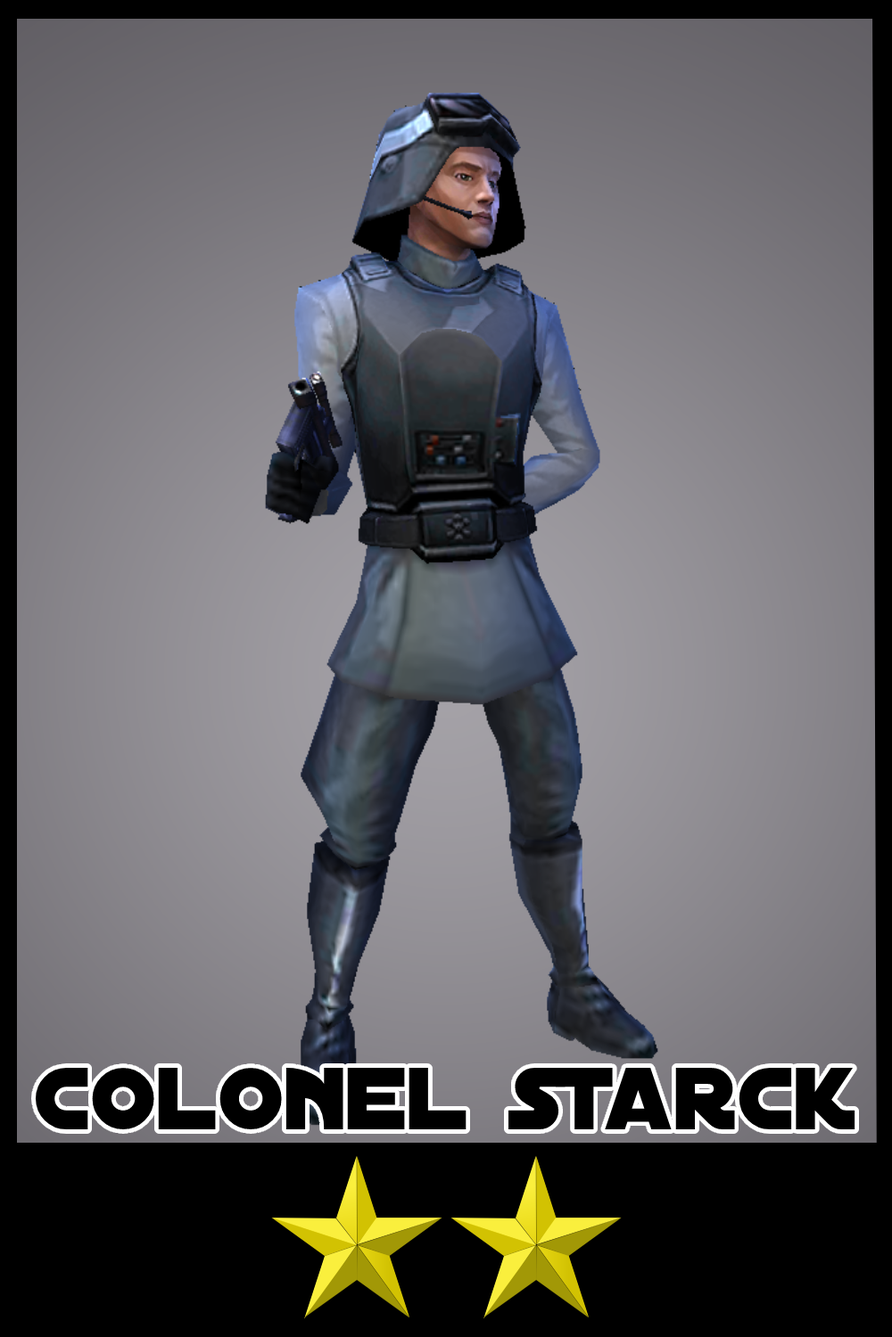
<style>
.page{position:relative;width:892px;height:1337px}
.page>*{position:absolute;margin:0}
.t1{font:94.5px "DistantGalaxy";color:#000000}
</style>
<div class="page">
<p class="t1" style="left:36px;top:1068px;width:819px;height:62px">colonel starck</p>
</div>
